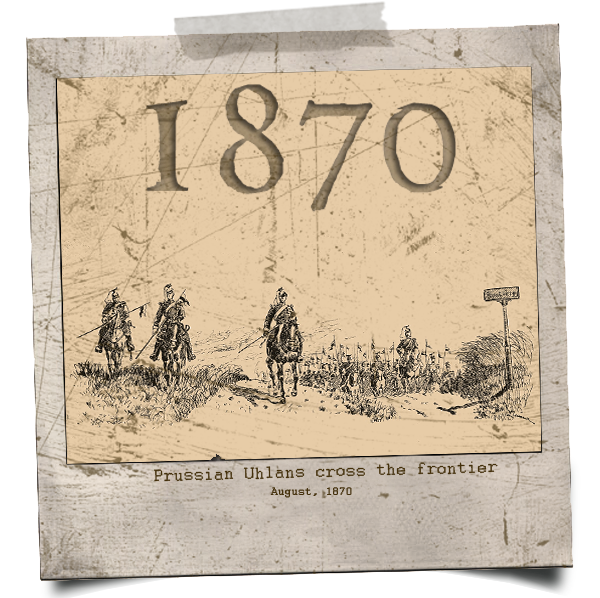
<style>
.page{position:relative;width:600px;height:598px}
.page>*{position:absolute;margin:0}
.t1{font:18px "Courier";color:#463003}
.t2{font:12px "Courier";color:#463003}
</style>
<div class="page">
<p class="t1" style="left:154px;top:461px;width:344px;height:21px;rotate:-1deg">Prussian Uhlans cross the frontier</p>
<p class="t2" style="left:270px;top:487px;width:82px;height:11px">August, 1870</p>
</div>
